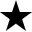
<style>
.page{position:relative;width:32px;height:32px;background:#ffffff}
.page>*{position:absolute;margin:0}
.t1{font:57px "AppleSymbols";color:#000000}
</style>
<div class="page">
<p class="t1" style="left:0px;top:0px;width:32px;height:31px">★</p>
</div>
